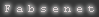
<style>
.page{position:relative;width:99px;height:17px}
.page>*{position:absolute;margin:0}
.t1{font:11px "CourierNewPSMT";letter-spacing:0.458em;color:#dbd1d1}
</style>
<div class="page">
<p class="t1" style="left:5px;top:5px;width:89px;height:7px">Fabsenet</p>
</div>
